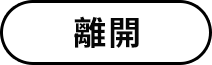
<style>
.page{position:relative;width:212px;height:65px;background:#ffffff}
.page>*{position:absolute;margin:0}
.t1{font:33.3px "NotoSansCJKtc-Bold";letter-spacing:0.06em;color:#060606}
</style>
<div class="page">
<p class="t1" style="left:74px;top:16px;width:65px;height:32px">離開</p>
</div>
